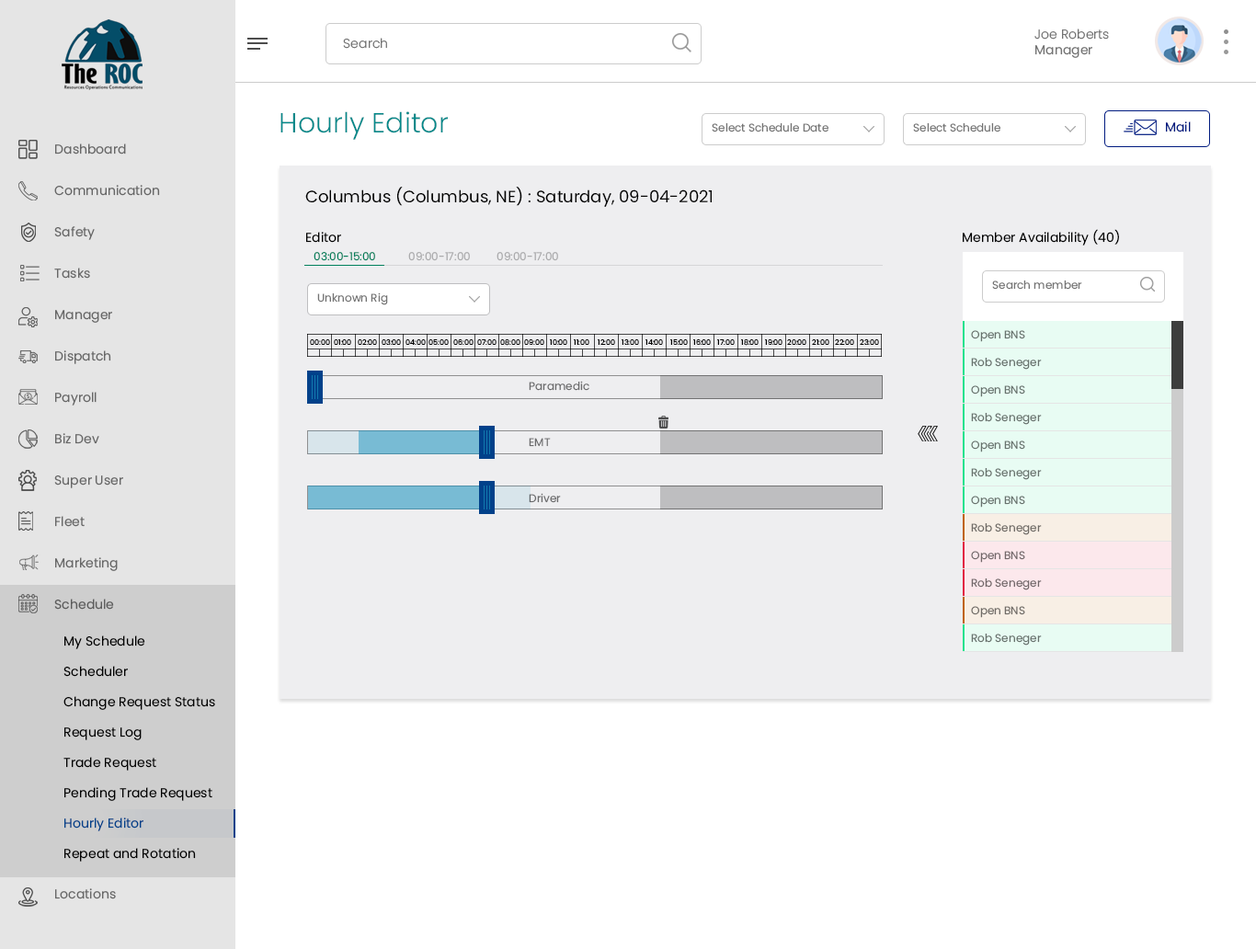
<style>
.page{position:relative;width:1256px;height:949px;background:#ffffff}
.page>*{position:absolute;margin:0}
.t1{font:12.9px "Poppins-Light";color:#737373}
.t2{font:12.9px "Poppins-Regular";color:#737373}
.t3{font:27.6px "Poppins-Light";color:#03898a}
.t4{font:11px "Poppins-Regular";color:#737373}
.t5{font:12.9px "Poppins-Regular";color:#011b80}
.t6{font:12.9px/41.4px "Poppins-Regular";color:#676767}
.t7{font:16.6px "Poppins-Regular";color:#000000}
.t8{font:12.9px "Poppins-Regular";color:#000000}
.t9{font:11px "Poppins-Regular";color:#00805c}
.t10{font:11px "Poppins-Regular";color:#ababad}
.t11{font:7.4px "Poppins-Regular";color:#000000}
.t12{font:11px "Poppins-Regular";color:#68726e}
.t13{font:11px/56.1px "Poppins-Regular";color:#6b6b6c}
.t14{font:11px/28.5px "Poppins-Regular";color:#6b6b6c}
.t15{font:11px/10.1px "Poppins-Regular";color:#6b6b6c}
.t16{font:11px "Poppins-Regular";color:#706c67}
.t17{font:11px "Poppins-Regular";color:#72686a}
.t18{font:12.9px/30.4px "Poppins-Regular";color:#000000}
.t19{font:12.9px/30.4px "Poppins-Regular";color:#01418a}
</style>
<div class="page">
<p class="t1" style="left:1035px;top:29px;width:74px;height:29px">Joe Roberts<br><span class="t2">Manager</span></p>
<p class="t1" style="left:343px;top:38px;width:44px;height:11px">Search</p>
<p class="t3" style="left:281px;top:111px;width:167px;height:29px">Hourly Editor</p>
<p class="t4" style="left:712px;top:123px;width:117px;height:9px">Select Schedule Date</p>
<p class="t4" style="left:913px;top:123px;width:88px;height:9px">Select Schedule</p>
<p class="t5" style="left:1166px;top:121px;width:25px;height:11px">Mail</p>
<p class="t6" style="left:54px;top:143px;width:106px;height:756px">Dashboard<br>Communication<br>Safety<br>Tasks<br>Manager<br>Dispatch<br>Payroll<br>Biz Dev<br>Super User<br>Fleet<br>Marketing<br>Schedule<br><br><br><br><br><br><br>Locations</p>
<p class="t7" style="left:305px;top:187px;width:407px;height:20px">Columbus (Columbus, NE) : Saturday, 09-04-2021</p>
<p class="t8" style="left:306px;top:232px;width:35px;height:11px">Editor</p>
<p class="t8" style="left:963px;top:229px;width:156px;height:17px">Member Availability (40)</p>
<p class="t9" style="left:314px;top:252px;width:61px;height:9px">03:00-15:00</p>
<p class="t10" style="left:408px;top:252px;width:62px;height:9px">09:00-17:00</p>
<p class="t10" style="left:497px;top:252px;width:61px;height:9px">09:00-17:00</p>
<p class="t4" style="left:992px;top:281px;width:91px;height:9px">Search member</p>
<p class="t4" style="left:317px;top:292px;width:71px;height:13px">Unknown Rig</p>
<p class="t11" style="left:310px;top:339px;width:20px;height:6px">00:00</p>
<p class="t11" style="left:334px;top:339px;width:17px;height:6px">01:00</p>
<p class="t11" style="left:358px;top:339px;width:19px;height:6px">02:00</p>
<p class="t11" style="left:382px;top:339px;width:19px;height:6px">03:00</p>
<p class="t11" style="left:406px;top:339px;width:20px;height:6px">04:00</p>
<p class="t11" style="left:429px;top:339px;width:20px;height:6px">05:00</p>
<p class="t11" style="left:453px;top:339px;width:21px;height:6px">06:00</p>
<p class="t11" style="left:477px;top:339px;width:20px;height:6px">07:00</p>
<p class="t11" style="left:500px;top:339px;width:21px;height:7px">08:00</p>
<p class="t11" style="left:524px;top:339px;width:20px;height:6px">09:00</p>
<p class="t11" style="left:550px;top:339px;width:17px;height:6px">10:00</p>
<p class="t11" style="left:574px;top:339px;width:16px;height:6px">11:00</p>
<p class="t11" style="left:598px;top:339px;width:17px;height:6px">12:00</p>
<p class="t11" style="left:622px;top:339px;width:17px;height:6px">13:00</p>
<p class="t11" style="left:646px;top:339px;width:17px;height:6px">14:00</p>
<p class="t11" style="left:670px;top:339px;width:18px;height:6px">15:00</p>
<p class="t11" style="left:693px;top:339px;width:18px;height:6px">16:00</p>
<p class="t11" style="left:717px;top:339px;width:18px;height:6px">17:00</p>
<p class="t11" style="left:741px;top:339px;width:18px;height:7px">18:00</p>
<p class="t11" style="left:765px;top:339px;width:18px;height:6px">19:00</p>
<p class="t11" style="left:787px;top:339px;width:20px;height:6px">20:00</p>
<p class="t11" style="left:812px;top:339px;width:18px;height:6px">21:00</p>
<p class="t11" style="left:835px;top:339px;width:19px;height:6px">22:00</p>
<p class="t11" style="left:860px;top:339px;width:19px;height:6px">23:00</p>
<p class="t12" style="left:971px;top:330px;width:54px;height:12px">Open BNS</p>
<p class="t12" style="left:971px;top:358px;width:71px;height:12px">Rob Seneger</p>
<p class="t13" style="left:529px;top:381px;width:61px;height:122px"><span class="t14">Para</span><span class="t15">medic<br></span>EMT<br>Driver</p>
<p class="t12" style="left:971px;top:385px;width:54px;height:12px">Open BNS</p>
<p class="t12" style="left:971px;top:413px;width:71px;height:12px">Rob Seneger</p>
<p class="t12" style="left:971px;top:441px;width:54px;height:11px">Open BNS</p>
<p class="t12" style="left:971px;top:468px;width:71px;height:12px">Rob Seneger</p>
<p class="t12" style="left:971px;top:496px;width:54px;height:12px">Open BNS</p>
<p class="t16" style="left:971px;top:523px;width:71px;height:12px">Rob Seneger</p>
<p class="t17" style="left:971px;top:551px;width:54px;height:12px">Open BNS</p>
<p class="t17" style="left:971px;top:578px;width:71px;height:12px">Rob Seneger</p>
<p class="t16" style="left:971px;top:606px;width:54px;height:12px">Open BNS</p>
<p class="t18" style="left:63px;top:636px;width:152px;height:226px">My Schedule<br>Scheduler<br>Change Request Status<br>Request Log<br>Trade Request<br>Pending Trade Request<br><span class="t19">Hourly Editor<br></span>Repeat and Rotation</p>
<p class="t12" style="left:971px;top:634px;width:71px;height:12px">Rob Seneger</p>
</div>
